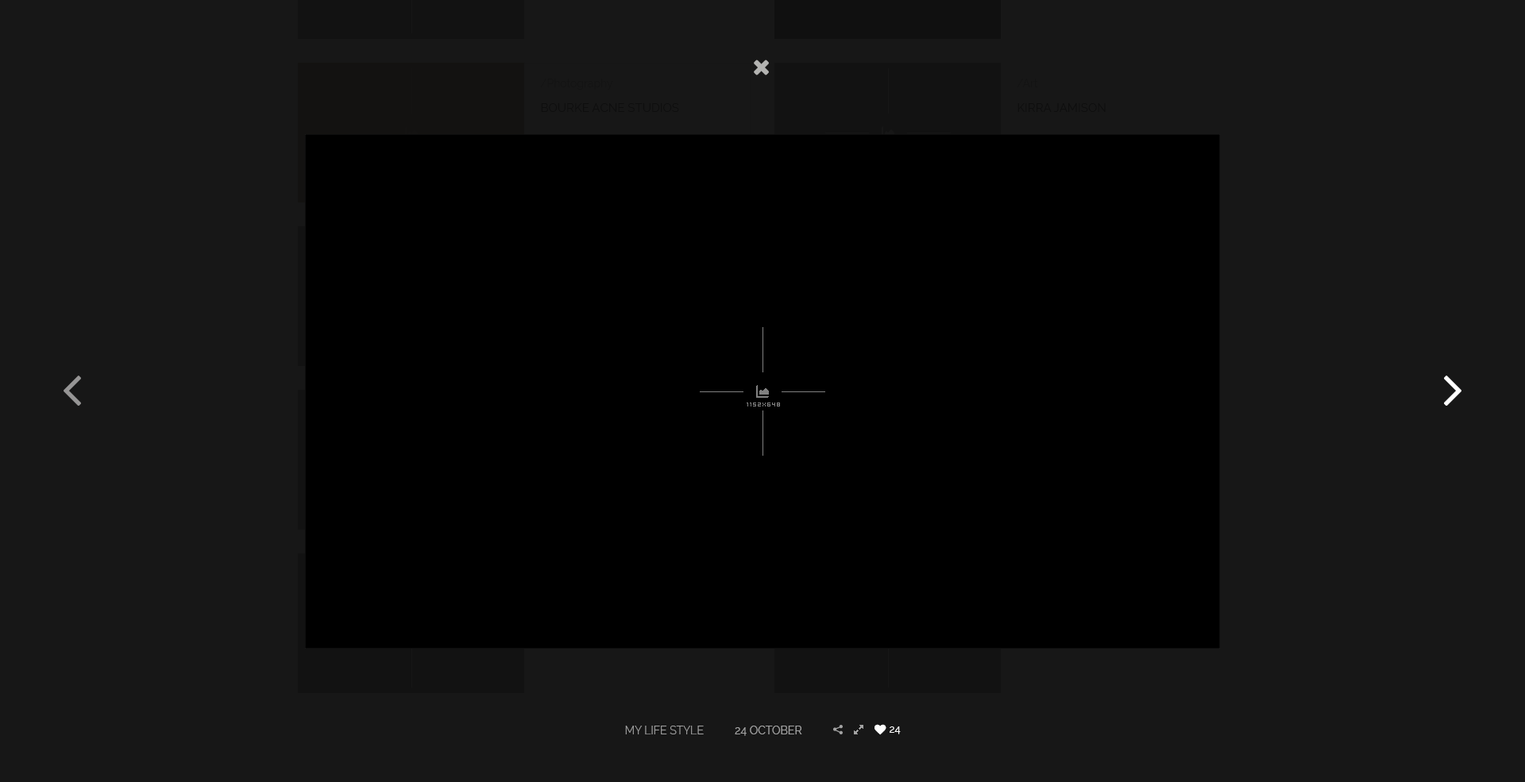
<style>
.page{position:relative;width:1525px;height:782px;background:#171717}
.page>*{position:absolute;margin:0}
.t1{font:11.1px "Raleway-Light";color:#a3a3a3;text-transform:uppercase}
.t2{font:11.1px "Raleway";color:#a3a3a3;text-transform:uppercase}
.t3{font:10.3px "Raleway";color:#ffffff}
</style>
<div class="page">
<p class="t1" style="left:625px;top:726px;width:79px;height:8px">my life style</p>
<p class="t2" style="left:734px;top:726px;width:68px;height:10px">24 October</p>
<p class="t3" style="left:889px;top:727px;width:11px;height:7px">24</p>
</div>
